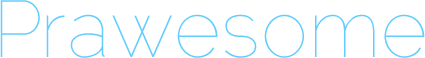
<style>
.page{position:relative;width:425px;height:58px;background:#ffffff}
.page>*{position:absolute;margin:0}
.t1{font:80px "Raleway-Thin";color:#63cdfe}
</style>
<div class="page">
<p class="t1" style="left:0px;top:0px;width:425px;height:58px">Prawesome</p>
</div>
